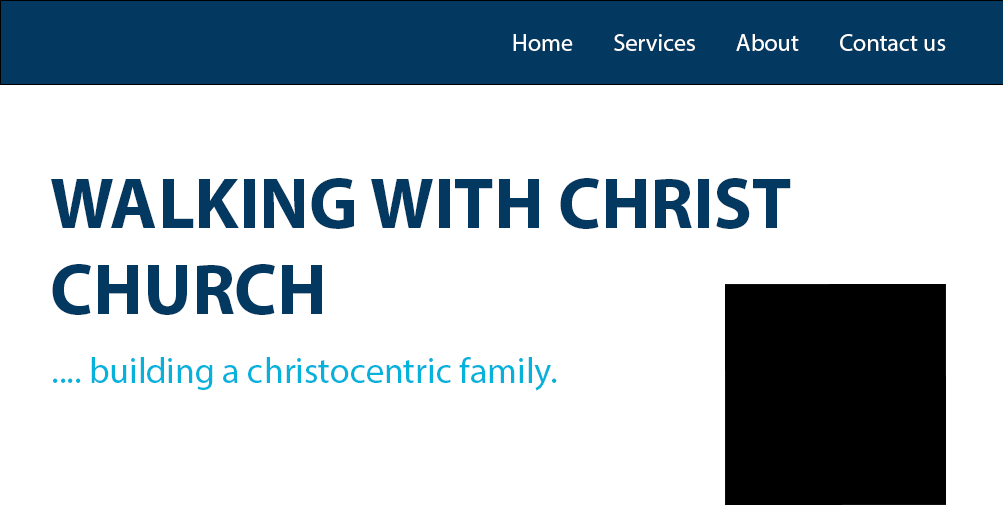
<style>
.page{position:relative;width:1003px;height:505px;background:#ffffff}
.page>*{position:absolute;margin:0}
.t1{font:24px "MyriadPro-Regular";color:#ffffff}
.t2{font:72px "MyriadPro-Bold";color:#033860}
.t3{font:36px "MyriadPro-Regular";color:#05b2dc}
</style>
<div class="page">
<p class="t1" style="left:513px;top:34px;width:433px;height:17px">Home        Services        About        Contact us</p>
<p class="t2" style="left:51px;top:178px;width:740px;height:137px">WALKING WITH CHRIST <br>CHURCH</p>
<p class="t3" style="left:53px;top:357px;width:504px;height:34px">.... building a christocentric family.</p>
</div>
